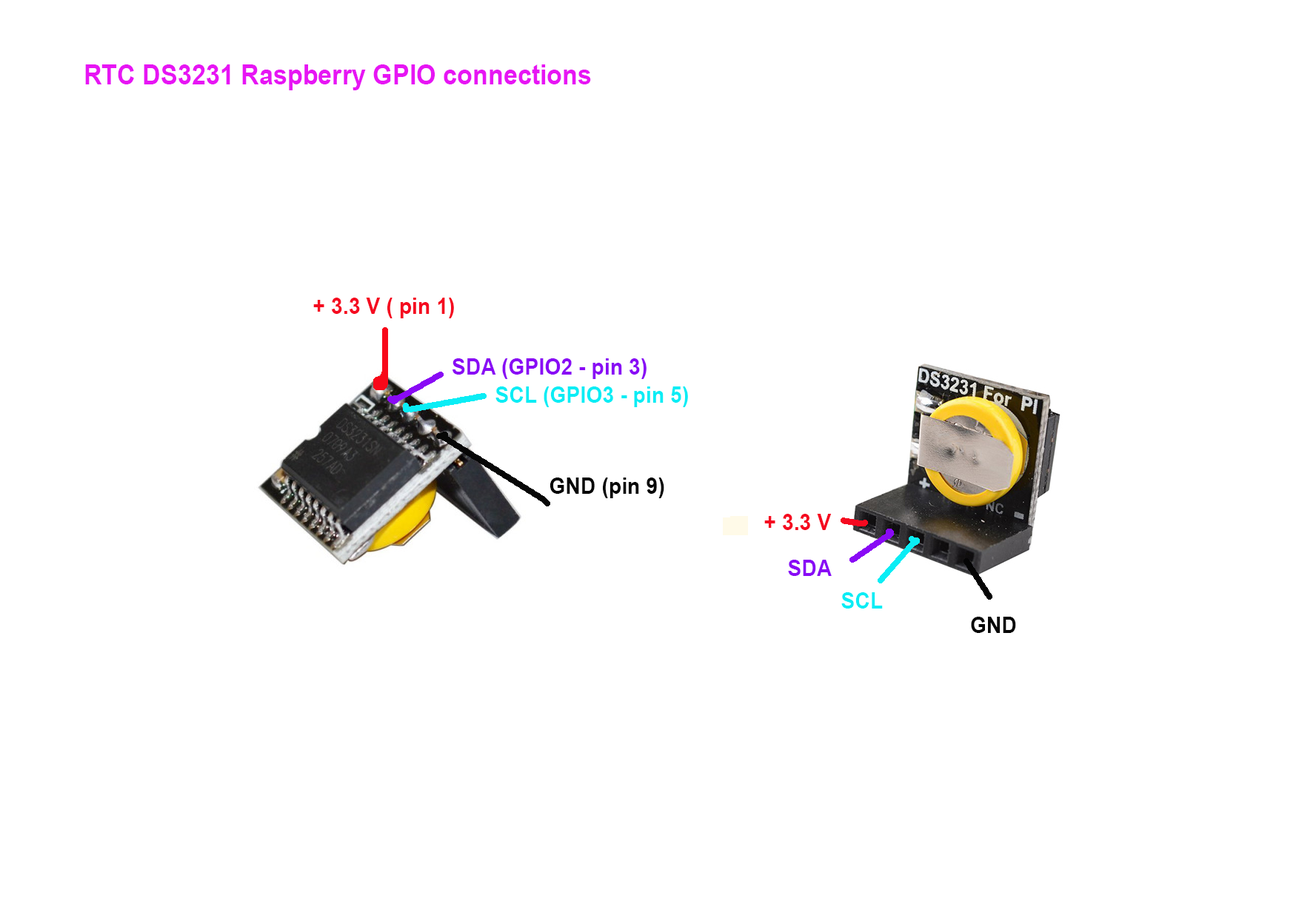
<style>
.page{position:relative;width:1299px;height:918px;background:#ffffff}
.page>*{position:absolute;margin:0}
.t1{font:27.8px "Arial-BoldMT";color:#e715f4;scale:0.91 1}
.t2{font:23.1px "Arial-BoldMT";color:#f50a20;scale:0.91 1}
.t3{font:23.1px "Arial-BoldMT";color:#890af5;scale:0.91 1}
.t4{font:23.1px "Arial-BoldMT";color:#0aedf5;scale:0.91 1}
.t5{font:23.1px "Arial-BoldMT";color:#050505;scale:0.91 1}
</style>
<div class="page">
<p class="t1" style="left:85px;top:64px;width:506px;height:26px">RTC DS3231 Raspberry GPIO connections</p>
<p class="t2" style="left:313px;top:298px;width:141px;height:20px">+ 3.3 V ( pin 1)</p>
<p class="t3" style="left:452px;top:358px;width:194px;height:21px">SDA (GPIO2 - pin 3)</p>
<p class="t4" style="left:495px;top:387px;width:193px;height:20px">SCL (GPIO3 - pin 5)</p>
<p class="t5" style="left:549px;top:478px;width:115px;height:20px">GND (pin 9)</p>
<p class="t2" style="left:764px;top:514px;width:68px;height:16px">+ 3.3 V</p>
<p class="t3" style="left:788px;top:560px;width:44px;height:16px">SDA</p>
<p class="t4" style="left:841px;top:592px;width:42px;height:17px">SCL</p>
<p class="t5" style="left:971px;top:617px;width:45px;height:16px">GND</p>
</div>
